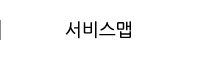
<style>
.page{position:relative;width:200px;height:60px;background:#ffffff}
.page>*{position:absolute;margin:0}
.t1{font:18px "NanumGothic";color:#000000}
</style>
<div class="page">
<p class="t1" style="left:65px;top:21px;width:66px;height:18px">서비스맵</p>
</div>
